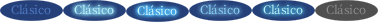
<style>
.page{position:relative;width:378px;height:22px;background:#ffffff}
.page>*{position:absolute;margin:0}
.t1{font:14px "OfficialFateFont-Medium";color:#507ac3}
.t2{font:14px "OfficialFateFont-Medium";color:#c1f1fc}
.t3{font:14px "OfficialFateFont-Medium";color:#cff7fe}
.t4{font:14px "OfficialFateFont-Medium";color:#8cd2f6}
.t5{font:14px "OfficialFateFont-Medium";color:#8d8d8d}
</style>
<div class="page">
<p class="t1" style="left:11px;top:4px;width:40px;height:11px">Clásico</p>
<p class="t2" style="left:74px;top:4px;width:40px;height:11px">Clásico</p>
<p class="t3" style="left:137px;top:5px;width:40px;height:11px">Clásico</p>
<p class="t4" style="left:200px;top:4px;width:40px;height:11px">Clásico</p>
<p class="t2" style="left:263px;top:4px;width:40px;height:11px">Clásico</p>
<p class="t5" style="left:326px;top:4px;width:40px;height:11px">Clásico</p>
</div>
